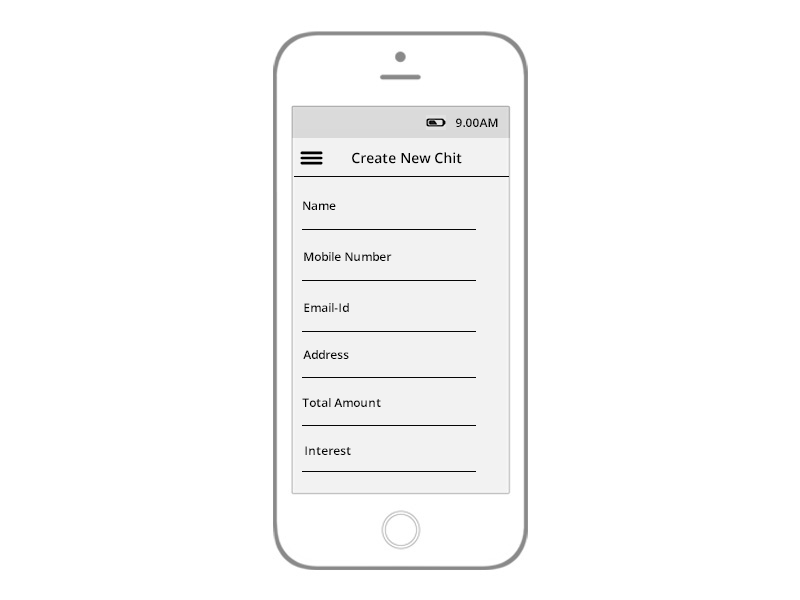
<style>
.page{position:relative;width:800px;height:600px;background:#ffffff}
.page>*{position:absolute;margin:0}
.t1{font:12px "OpenSans-Semibold";color:#030303}
.t2{font:14px "OpenSans-Semibold";color:#030303}
</style>
<div class="page">
<p class="t1" style="left:456px;top:118px;width:42px;height:9px">9.00AM</p>
<p class="t2" style="left:352px;top:152px;width:110px;height:12px">Create New Chit</p>
<p class="t1" style="left:303px;top:201px;width:33px;height:9px">Name</p>
<p class="t1" style="left:304px;top:252px;width:88px;height:9px">Mobile Number</p>
<p class="t1" style="left:304px;top:303px;width:45px;height:9px">Email-Id</p>
<p class="t1" style="left:303px;top:350px;width:46px;height:9px">Address</p>
<p class="t1" style="left:302px;top:398px;width:79px;height:9px">Total Amount</p>
<p class="t1" style="left:305px;top:446px;width:46px;height:9px">Interest</p>
</div>
